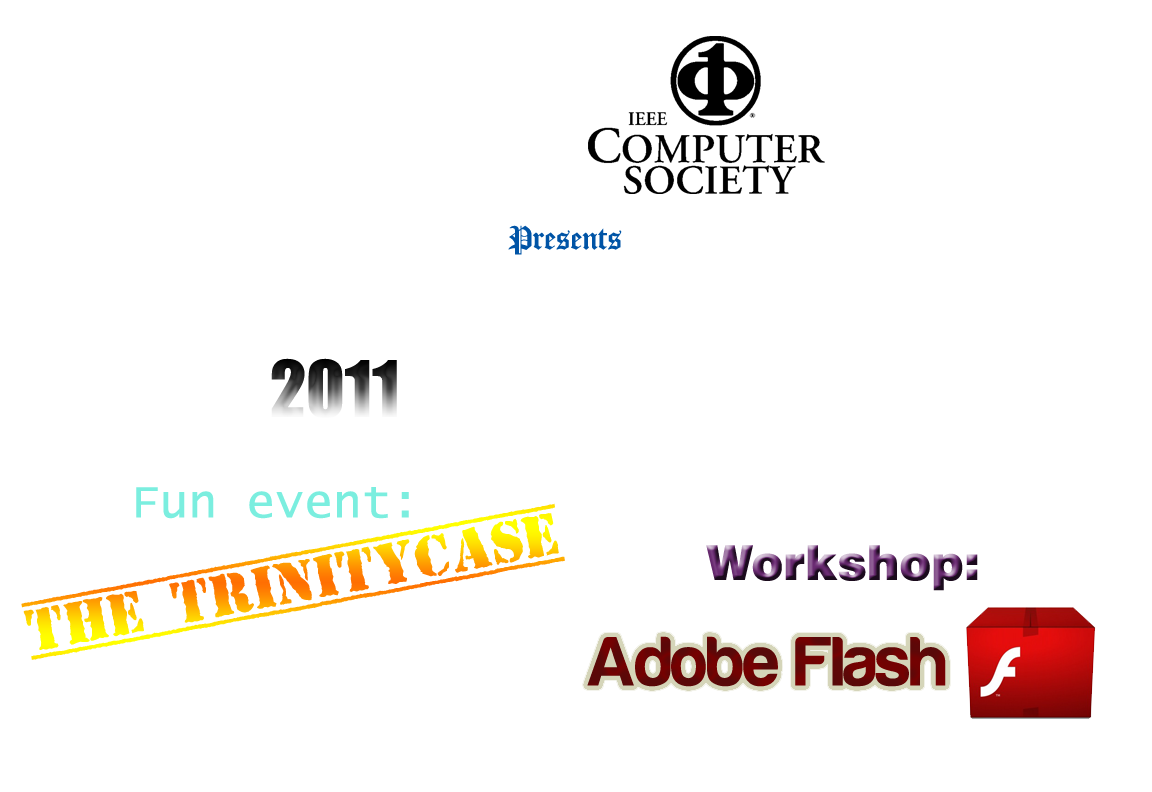
<style>
.page{position:relative;width:1152px;height:792px;background:#ffffff}
.page>*{position:absolute;margin:0}
.t1{font:36px "OldLondonAlternate";color:#0054a6}
.t2{font:72px "Impact"}
.t3{font:48px "LucidaConsole";color:#7beedf}
.t4{font:60px "TopSecret-Bold"}
.t5{font:48px "Swiss721BT-Black"}
.t6{font:72px "Harabara";color:#550a0a}
</style>
<div class="page">
<p class="t1" style="left:508px;top:225px;width:114px;height:30px">Presents</p>
<p class="t2" style="left:271px;top:358px;width:126px;height:61px">2011</p>
<p class="t3" style="left:136px;top:487px;width:273px;height:32px">Fun event:</p>
<p class="t4" style="left:21px;top:503px;width:544px;height:157px;rotate:-11deg">The trinitycase</p>
<p class="t5" style="left:706px;top:545px;width:272px;height:46px">Workshop:</p>
<p class="t6" style="left:587px;top:636px;width:359px;height:51px">Adobe Flash</p>
</div>
